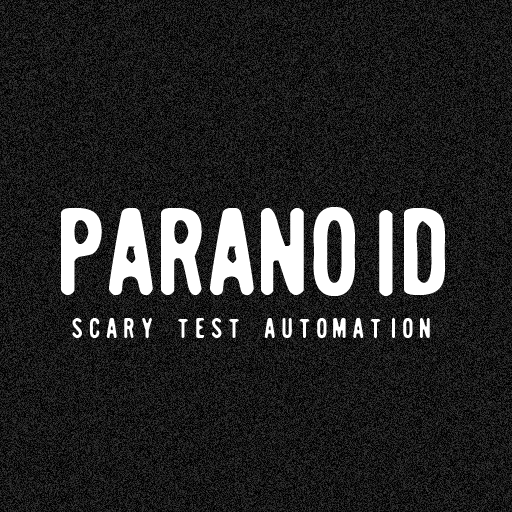
<style>
.page{position:relative;width:512px;height:512px}
.page>*{position:absolute;margin:0}
.t1{font:109.2px "SugarCube";color:#ffffff}
.t2{font:25px "SugarCube";letter-spacing:0.23em;color:#ffffff}
</style>
<div class="page">
<p class="t1" style="left:61px;top:207px;width:384px;height:89px">PARANOID</p>
<p class="t2" style="left:72px;top:318px;width:358px;height:20px">SCARY TEST AUTOMATION</p>
</div>
